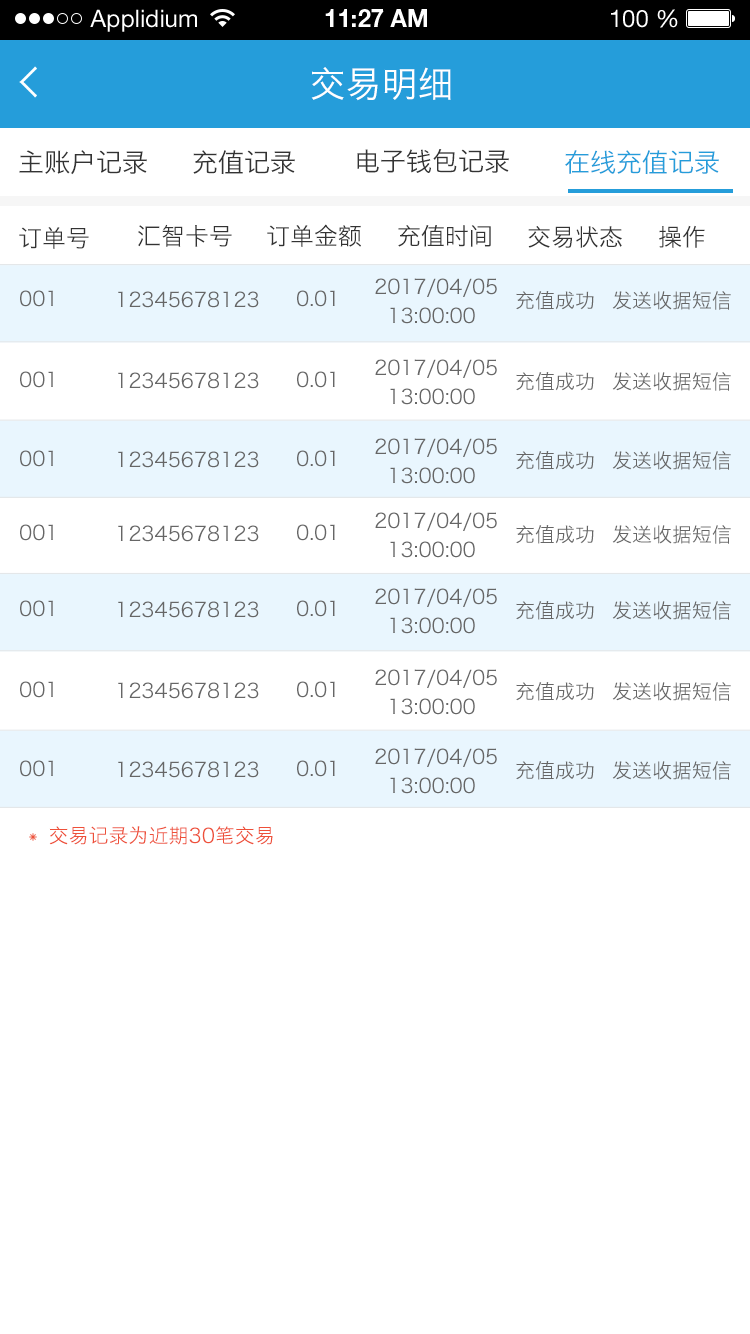
<style>
.page{position:relative;width:750px;height:1334px;background:#ffffff}
.page>*{position:absolute;margin:0}
.t1{font:24px "HelveticaNeueLTStd-Roman";color:#ffffff}
.t2{font:24px "HelveticaNeueLTStd-Bd";color:#ffffff}
.t3{font:36px "HiraginoSansGB-W3";color:#ffffff;text-transform:uppercase}
.t4{font:26px "HiraginoSansGB-W3";color:#333333;text-transform:uppercase}
.t5{font:26px "HiraginoSansGB-W3";color:#259dda;text-transform:uppercase}
.t6{font:24px "HiraginoSansGB-W3";color:#333333;text-transform:uppercase}
.t7{font:20px/29px "HiraginoSansGB-W3";color:#666666;text-transform:uppercase}
.t8{font:20px "HiraginoSansGB-W3";color:#666666;text-transform:uppercase}
.t9{font:20px "HiraginoSansGB-W3";color:#ee5039;text-transform:uppercase}
</style>
<div class="page">
<p class="t1" style="left:90px;top:9px;width:107px;height:23px">Applidium</p>
<p class="t2" style="left:325px;top:9px;width:102px;height:18px">11:27 AM</p>
<p class="t1" style="left:611px;top:9px;width:67px;height:19px">100 %</p>
<p class="t3" style="left:311px;top:67px;width:140px;height:34px">交易明细</p>
<p class="t4" style="left:19px;top:150px;width:128px;height:25px">主账户记录</p>
<p class="t4" style="left:193px;top:150px;width:102px;height:25px">充值记录</p>
<p class="t4" style="left:357px;top:149px;width:152px;height:24px">电子钱包记录</p>
<p class="t5" style="left:565px;top:150px;width:154px;height:25px">在线充值记录</p>
<p class="t6" style="left:19px;top:227px;width:70px;height:22px">订单号</p>
<p class="t6" style="left:138px;top:224px;width:94px;height:23px">汇智卡号</p>
<p class="t6" style="left:267px;top:224px;width:94px;height:23px">订单金额</p>
<p class="t6" style="left:398px;top:225px;width:93px;height:22px">充值时间</p>
<p class="t6" style="left:528px;top:226px;width:94px;height:22px">交易状态</p>
<p class="t6" style="left:659px;top:225px;width:46px;height:23px">操作</p>
<p class="t7" style="left:375px;top:278px;width:122px;height:46px">2017/04/05<br>  13:00:00</p>
<p class="t8" style="left:20px;top:290px;width:33px;height:17px">001</p>
<p class="t8" style="left:118px;top:291px;width:141px;height:17px">12345678123</p>
<p class="t8" style="left:297px;top:290px;width:38px;height:17px">0.01</p>
<p class="t8" style="left:516px;top:291px;width:78px;height:19px">充值成功</p>
<p class="t8" style="left:612px;top:291px;width:119px;height:19px">发送收据短信</p>
<p class="t7" style="left:375px;top:359px;width:122px;height:46px">2017/04/05<br>  13:00:00</p>
<p class="t8" style="left:20px;top:371px;width:33px;height:17px">001</p>
<p class="t8" style="left:118px;top:372px;width:141px;height:17px">12345678123</p>
<p class="t8" style="left:297px;top:371px;width:38px;height:17px">0.01</p>
<p class="t8" style="left:516px;top:372px;width:78px;height:19px">充值成功</p>
<p class="t8" style="left:612px;top:372px;width:119px;height:19px">发送收据短信</p>
<p class="t7" style="left:375px;top:438px;width:122px;height:46px">2017/04/05<br>  13:00:00</p>
<p class="t8" style="left:20px;top:450px;width:33px;height:17px">001</p>
<p class="t8" style="left:118px;top:451px;width:141px;height:17px">12345678123</p>
<p class="t8" style="left:297px;top:450px;width:38px;height:17px">0.01</p>
<p class="t8" style="left:516px;top:451px;width:78px;height:19px">充值成功</p>
<p class="t8" style="left:612px;top:451px;width:119px;height:19px">发送收据短信</p>
<p class="t7" style="left:375px;top:512px;width:122px;height:46px">2017/04/05<br>  13:00:00</p>
<p class="t8" style="left:20px;top:524px;width:33px;height:17px">001</p>
<p class="t8" style="left:118px;top:525px;width:141px;height:17px">12345678123</p>
<p class="t8" style="left:297px;top:524px;width:38px;height:17px">0.01</p>
<p class="t8" style="left:516px;top:525px;width:78px;height:19px">充值成功</p>
<p class="t8" style="left:612px;top:525px;width:119px;height:19px">发送收据短信</p>
<p class="t7" style="left:375px;top:588px;width:122px;height:46px">2017/04/05<br>  13:00:00</p>
<p class="t8" style="left:20px;top:600px;width:33px;height:17px">001</p>
<p class="t8" style="left:118px;top:601px;width:141px;height:17px">12345678123</p>
<p class="t8" style="left:297px;top:600px;width:38px;height:17px">0.01</p>
<p class="t8" style="left:516px;top:601px;width:78px;height:19px">充值成功</p>
<p class="t8" style="left:612px;top:601px;width:119px;height:19px">发送收据短信</p>
<p class="t7" style="left:375px;top:669px;width:122px;height:46px">2017/04/05<br>  13:00:00</p>
<p class="t8" style="left:20px;top:681px;width:33px;height:17px">001</p>
<p class="t8" style="left:118px;top:682px;width:141px;height:17px">12345678123</p>
<p class="t8" style="left:297px;top:681px;width:38px;height:17px">0.01</p>
<p class="t8" style="left:516px;top:682px;width:78px;height:19px">充值成功</p>
<p class="t8" style="left:612px;top:682px;width:119px;height:19px">发送收据短信</p>
<p class="t7" style="left:375px;top:748px;width:122px;height:46px">2017/04/05<br>  13:00:00</p>
<p class="t8" style="left:20px;top:760px;width:33px;height:17px">001</p>
<p class="t8" style="left:118px;top:761px;width:141px;height:17px">12345678123</p>
<p class="t8" style="left:297px;top:760px;width:38px;height:17px">0.01</p>
<p class="t8" style="left:516px;top:761px;width:78px;height:19px">充值成功</p>
<p class="t8" style="left:612px;top:761px;width:119px;height:19px">发送收据短信</p>
<p class="t9" style="left:49px;top:826px;width:224px;height:19px">交易记录为近期30笔交易</p>
</div>
